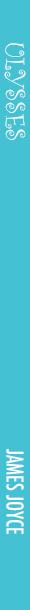
<style>
.page{position:relative;width:30px;height:610px;background:#44c2d4}
.page>*{position:absolute;margin:0}
.t1{font:28.4px "CurlzMT";color:#fdfefd;scale:0.94 1}
.t2{font:22.4px "Futura-CondensedMedium";color:#fffdfd;scale:0.94 1}
</style>
<div class="page">
<p class="t1" style="left:4px;top:43px;width:22px;height:97px;rotate:90deg">ULYSSES</p>
<p class="t2" style="left:6px;top:449px;width:18px;height:85px;rotate:90deg">JAMES JOYCE</p>
</div>
